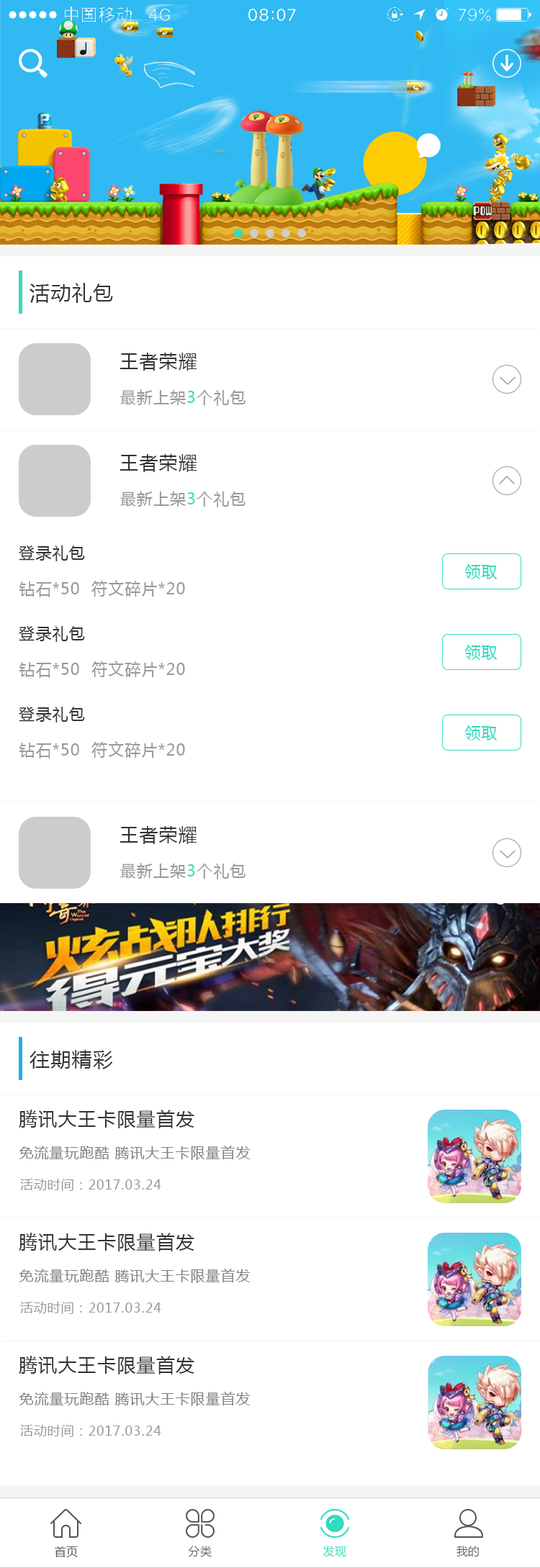
<style>
.page{position:relative;width:540px;height:1568px;background:#ffffff}
.page>*{position:absolute;margin:0}
.t1{font:20.1px "MicrosoftYaHei";letter-spacing:0.05em;color:#333333}
.t2{font:18.7px "MicrosoftYaHei";letter-spacing:0.05em;color:#333333}
.t3{font:15.8px "MicrosoftYaHei";letter-spacing:0.05em;color:#999999}
.t4{font:15.8px "MicrosoftYaHei";letter-spacing:0.05em;color:#34dbbf}
.t5{font:15.8px "MicrosoftYaHei";letter-spacing:0.05em;color:#333333}
.t6{font:14.4px "MicrosoftYaHei";letter-spacing:0.05em;color:#808080}
.t7{font:13px "MicrosoftYaHei";letter-spacing:0.05em;color:#999999}
.t8{font:11.5px "MicrosoftYaHei";letter-spacing:0.025em;color:#666666}
.t9{font:11.5px "MicrosoftYaHei";letter-spacing:0.02em;color:#666666}
.t10{font:11.5px "MicrosoftYaHei";letter-spacing:0.02em;color:#34dbbf}
.t11{font:11.3px "MicrosoftYaHei";letter-spacing:0.02em;color:#666666}
</style>
<div class="page">
<p class="t1" style="left:30px;top:283px;width:83px;height:20px">活动礼包</p>
<p class="t2" style="left:119px;top:353px;width:78px;height:18px">王者荣耀</p>
<p class="t3" style="left:120px;top:389px;width:125px;height:17px">最新上架<span class="t4">3</span>个礼包</p>
<p class="t2" style="left:119px;top:454px;width:78px;height:18px">王者荣耀</p>
<p class="t3" style="left:120px;top:491px;width:125px;height:16px">最新上架<span class="t4">3</span>个礼包</p>
<p class="t5" style="left:19px;top:545px;width:66px;height:16px">登录礼包</p>
<p class="t4" style="left:464px;top:564px;width:33px;height:15px">领取</p>
<p class="t3" style="left:19px;top:580px;width:166px;height:17px">钻石*50  符文碎片*20</p>
<p class="t5" style="left:19px;top:626px;width:66px;height:16px">登录礼包</p>
<p class="t4" style="left:464px;top:645px;width:33px;height:15px">领取</p>
<p class="t3" style="left:19px;top:661px;width:166px;height:17px">钻石*50  符文碎片*20</p>
<p class="t5" style="left:19px;top:707px;width:66px;height:15px">登录礼包</p>
<p class="t4" style="left:464px;top:725px;width:33px;height:15px">领取</p>
<p class="t3" style="left:19px;top:741px;width:166px;height:17px">钻石*50  符文碎片*20</p>
<p class="t2" style="left:119px;top:826px;width:78px;height:18px">王者荣耀</p>
<p class="t3" style="left:120px;top:863px;width:125px;height:16px">最新上架<span class="t4">3</span>个礼包</p>
<p class="t1" style="left:30px;top:1050px;width:83px;height:19px">往期精彩</p>
<p class="t2" style="left:19px;top:1110px;width:175px;height:18px">腾讯大王卡限量首发</p>
<p class="t6" style="left:19px;top:1146px;width:231px;height:14px">免流量玩跑酷 腾讯大王卡限量首发</p>
<p class="t7" style="left:20px;top:1179px;width:141px;height:12px">活动时间：2017.03.24</p>
<p class="t2" style="left:19px;top:1233px;width:175px;height:18px">腾讯大王卡限量首发</p>
<p class="t6" style="left:19px;top:1269px;width:231px;height:14px">免流量玩跑酷 腾讯大王卡限量首发</p>
<p class="t7" style="left:20px;top:1302px;width:141px;height:12px">活动时间：2017.03.24</p>
<p class="t2" style="left:19px;top:1356px;width:175px;height:18px">腾讯大王卡限量首发</p>
<p class="t6" style="left:19px;top:1392px;width:231px;height:14px">免流量玩跑酷 腾讯大王卡限量首发</p>
<p class="t7" style="left:20px;top:1425px;width:141px;height:12px">活动时间：2017.03.24</p>
<p class="t8" style="left:55px;top:1546px;width:23px;height:11px">首页</p>
<p class="t9" style="left:188px;top:1546px;width:24px;height:11px">分类</p>
<p class="t10" style="left:322px;top:1546px;width:24px;height:11px">发现</p>
<p class="t11" style="left:456px;top:1546px;width:23px;height:11px">我的</p>
</div>
